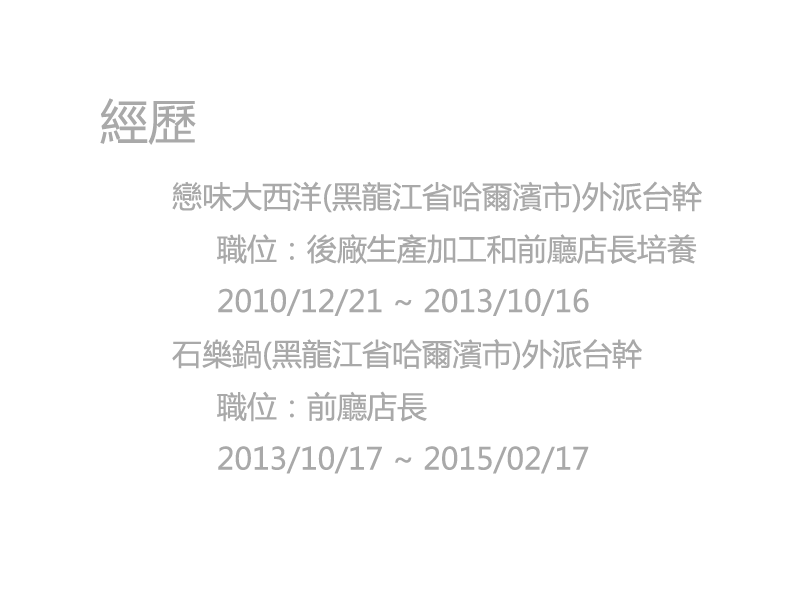
<style>
.page{position:relative;width:800px;height:600px;background:#ffffff}
.page>*{position:absolute;margin:0}
.t1{font:30px "MicrosoftYaHei";color:#a9a9a9}
.t2{font:48px "MicrosoftYaHei";color:#a9a9a9}
</style>
<div class="page">
<p class="t1" style="left:100px;top:98px;width:602px;height:376px"><span class="t2">經歷<br></span>  戀味大西洋(黑龍江省哈爾濱市)外派台幹<br>    職位：後廠生產加工和前廳店長培養<br>    2010/12/21 ~ 2013/10/16<br>  石樂鍋(黑龍江省哈爾濱市)外派台幹<br>    職位：前廳店長<br>    2013/10/17 ~ 2015/02/17</p>
</div>
